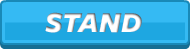
<style>
.page{position:relative;width:190px;height:49px;background:#35baf3}
.page>*{position:absolute;margin:0}
.t1{font:30px "FreightSansBlackItalic";text-transform:uppercase}
</style>
<div class="page">
<p class="t1" style="left:45px;top:12px;width:97px;height:21px">stand</p>
</div>
